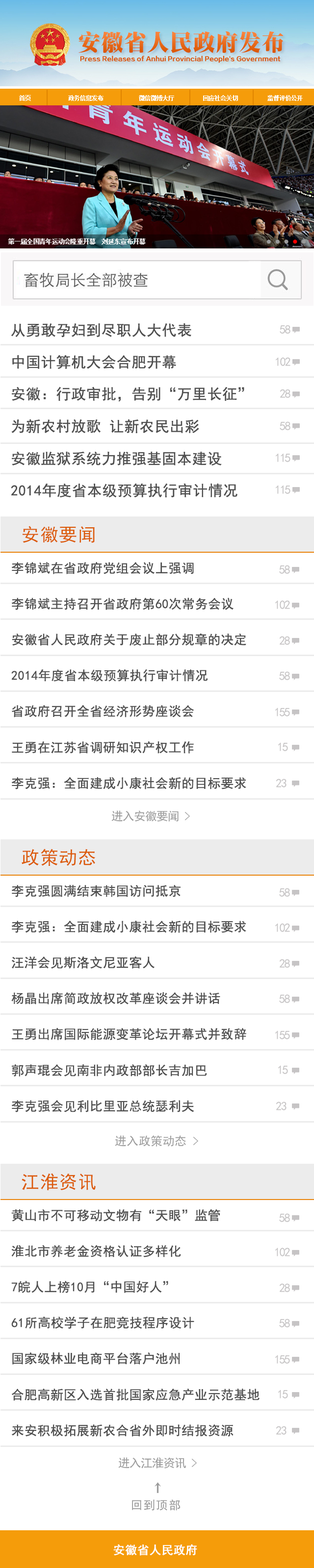
<style>
.page{position:relative;width:314px;height:1568px;background:#ffffff}
.page>*{position:absolute;margin:0}
.t1{font:5.8px "SimSun";color:#ffffff;font-weight:bold}
.t2{font:14.7px "SimHei";color:#4f4f4f;font-weight:bold}
.t3{font:12.1px "SimHei";letter-spacing:-0.08em;color:#c6c4c5}
.t4{font:18.2px "SimHei";letter-spacing:0.04em;color:#dc5b09}
.t5{font:12.7px "SimHei";color:#4f4f4f;font-weight:bold}
.t6{font:11.8px "SimHei";letter-spacing:-0.04em;color:#9b9b9b}
.t7{font:11.8px "SimHei";letter-spacing:0.02em;color:#9b9b9b}
.t8{font:11.8px "SimHei";letter-spacing:0.08em;color:#9b9b9b}
.t9{font:11.8px "SimHei";color:#ffffff;font-weight:bold}
</style>
<div class="page">
<p class="t1" style="left:19px;top:95px;width:12px;height:6px">首页</p>
<p class="t1" style="left:68px;top:95px;width:35px;height:6px">政务信息发布</p>
<p class="t1" style="left:139px;top:95px;width:35px;height:6px">微信微博大厅</p>
<p class="t1" style="left:203px;top:95px;width:35px;height:6px">回应社会关切</p>
<p class="t1" style="left:267px;top:95px;width:35px;height:6px">监督评价公开</p>
<p class="t2" style="left:11px;top:323px;width:180px;height:14px">从勇敢孕妇到尽职人大代表</p>
<p class="t3" style="left:279px;top:325px;width:11px;height:9px">58</p>
<p class="t2" style="left:12px;top:355px;width:164px;height:14px">中国计算机大会合肥开幕</p>
<p class="t3" style="left:275px;top:357px;width:15px;height:9px">102</p>
<p class="t2" style="left:12px;top:387px;width:232px;height:15px">安徽：行政审批，告别“万里长征”</p>
<p class="t3" style="left:279px;top:389px;width:11px;height:9px">28</p>
<p class="t2" style="left:11px;top:419px;width:188px;height:14px">为新农村放歌 让新农民出彩</p>
<p class="t3" style="left:279px;top:421px;width:11px;height:9px">58</p>
<p class="t2" style="left:12px;top:451px;width:209px;height:15px">安徽监狱系统力推强基固本建设</p>
<p class="t3" style="left:275px;top:453px;width:15px;height:9px">115</p>
<p class="t2" style="left:11px;top:483px;width:226px;height:14px">2014年度省本级预算执行审计情况</p>
<p class="t3" style="left:275px;top:485px;width:15px;height:9px">115</p>
<p class="t4" style="left:23px;top:526px;width:72px;height:17px">安徽要闻</p>
<p class="t5" style="left:11px;top:562px;width:183px;height:12px">李锦斌在省政府党组会议上强调</p>
<p class="t3" style="left:279px;top:565px;width:11px;height:9px">58</p>
<p class="t5" style="left:11px;top:598px;width:222px;height:12px">李锦斌主持召开省政府第60次常务会议</p>
<p class="t3" style="left:275px;top:600px;width:15px;height:9px">102</p>
<p class="t5" style="left:12px;top:633px;width:234px;height:13px">安徽省人民政府关于废止部分规章的决定</p>
<p class="t3" style="left:279px;top:636px;width:11px;height:9px">28</p>
<p class="t5" style="left:11px;top:669px;width:197px;height:13px">2014年度省本级预算执行审计情况</p>
<p class="t3" style="left:279px;top:671px;width:11px;height:9px">58</p>
<p class="t5" style="left:12px;top:705px;width:182px;height:12px">省政府召开全省经济形势座谈会</p>
<p class="t3" style="left:275px;top:708px;width:15px;height:8px">155</p>
<p class="t5" style="left:12px;top:741px;width:182px;height:13px">王勇在江苏省调研知识产权工作</p>
<p class="t3" style="left:278px;top:742px;width:10px;height:9px">15</p>
<p class="t5" style="left:11px;top:777px;width:235px;height:12px">李克强：全面建成小康社会新的目标要求</p>
<p class="t3" style="left:275px;top:779px;width:11px;height:8px">23</p>
<p class="t6" style="left:111px;top:810px;width:79px;height:12px">进入安徽要闻 &gt;</p>
<p class="t4" style="left:22px;top:849px;width:74px;height:17px">政策动态</p>
<p class="t5" style="left:11px;top:885px;width:169px;height:12px">李克强圆满结束韩国访问抵京</p>
<p class="t3" style="left:279px;top:888px;width:11px;height:9px">58</p>
<p class="t5" style="left:11px;top:921px;width:235px;height:12px">李克强：全面建成小康社会新的目标要求</p>
<p class="t3" style="left:275px;top:923px;width:15px;height:9px">102</p>
<p class="t5" style="left:12px;top:956px;width:142px;height:13px">汪洋会见斯洛文尼亚客人</p>
<p class="t3" style="left:279px;top:959px;width:11px;height:9px">28</p>
<p class="t5" style="left:11px;top:992px;width:209px;height:12px">杨晶出席简政放权改革座谈会并讲话</p>
<p class="t3" style="left:279px;top:994px;width:11px;height:9px">58</p>
<p class="t5" style="left:12px;top:1028px;width:234px;height:12px">王勇出席国际能源变革论坛开幕式并致辞</p>
<p class="t3" style="left:275px;top:1030px;width:15px;height:9px">155</p>
<p class="t5" style="left:12px;top:1064px;width:195px;height:13px">郭声琨会见南非内政部部长吉加巴</p>
<p class="t3" style="left:278px;top:1065px;width:10px;height:9px">15</p>
<p class="t5" style="left:11px;top:1100px;width:183px;height:12px">李克强会见利比里亚总统瑟利夫</p>
<p class="t3" style="left:275px;top:1102px;width:11px;height:8px">23</p>
<p class="t7" style="left:115px;top:1135px;width:83px;height:12px">进入政策动态 &gt;</p>
<p class="t4" style="left:22px;top:1173px;width:74px;height:17px">江淮资讯</p>
<p class="t5" style="left:11px;top:1209px;width:209px;height:13px">黄山市不可移动文物有“天眼”监管</p>
<p class="t3" style="left:279px;top:1213px;width:11px;height:9px">58</p>
<p class="t5" style="left:11px;top:1245px;width:170px;height:12px">淮北市养老金资格认证多样化</p>
<p class="t3" style="left:275px;top:1248px;width:15px;height:8px">102</p>
<p class="t5" style="left:11px;top:1281px;width:157px;height:12px">7皖人上榜10月“中国好人”</p>
<p class="t3" style="left:279px;top:1283px;width:11px;height:9px">28</p>
<p class="t5" style="left:11px;top:1316px;width:183px;height:13px">61所高校学子在肥竞技程序设计</p>
<p class="t3" style="left:279px;top:1319px;width:11px;height:8px">58</p>
<p class="t5" style="left:12px;top:1352px;width:168px;height:13px">国家级林业电商平台落户池州</p>
<p class="t3" style="left:275px;top:1355px;width:15px;height:9px">155</p>
<p class="t5" style="left:11px;top:1389px;width:248px;height:12px">合肥高新区入选首批国家应急产业示范基地</p>
<p class="t3" style="left:278px;top:1390px;width:10px;height:8px">15</p>
<p class="t5" style="left:12px;top:1424px;width:221px;height:13px">来安积极拓展新农合省外即时结报资源</p>
<p class="t3" style="left:275px;top:1426px;width:11px;height:9px">23</p>
<p class="t6" style="left:118px;top:1457px;width:78px;height:12px">进入江淮资讯 &gt;</p>
<p class="t8" style="left:132px;top:1499px;width:48px;height:12px">回到顶部</p>
<p class="t9" style="left:113px;top:1544px;width:84px;height:12px">安徽省人民政府</p>
</div>
